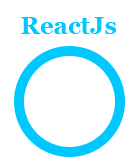
<style>
.page{position:relative;width:138px;height:162px;background:#ffffff}
.page>*{position:absolute;margin:0}
.t1{font:24px "Georgia-Bold";color:#00c8ff}
</style>
<div class="page">
<p class="t1" style="left:21px;top:17px;width:95px;height:17px">ReactJs</p>
</div>
